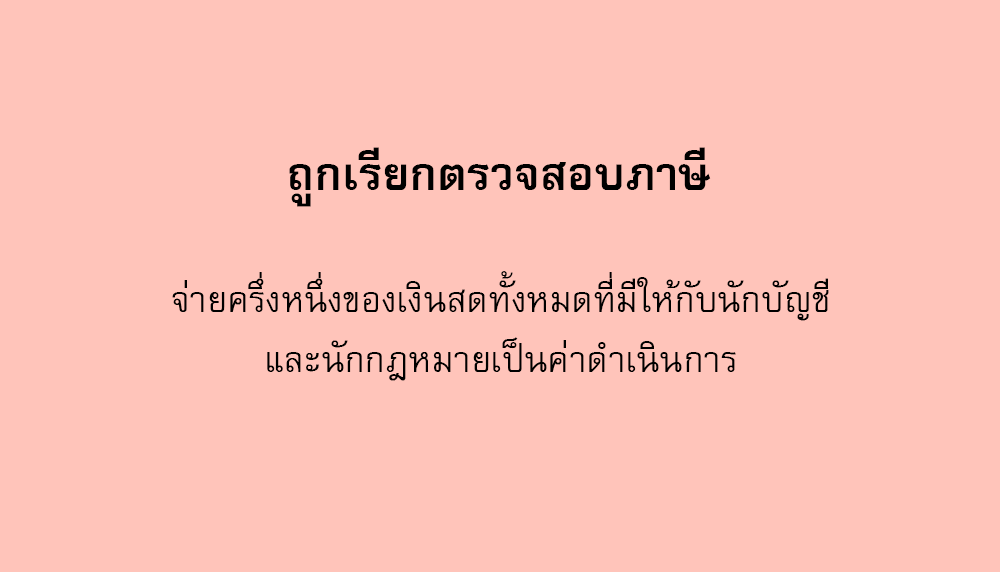
<style>
.page{position:relative;width:1000px;height:572px;background:#ffc4ba}
.page>*{position:absolute;margin:0}
.t1{font:64px "FreesiaUPCBold";color:#000000}
.t2{font:50px/60px "FreesiaUPC";color:#000000}
</style>
<div class="page">
<p class="t1" style="left:289px;top:147px;width:422px;height:60px">ถูกเรียกตรวจสอบภาษี</p>
<p class="t2" style="left:172px;top:271px;width:657px;height:110px;text-align:center">จ่ายครึ่งหนึ่งของเงินสดทั้งหมดที่มีให้กับนักบัญชี<br>และนักกฎหมายเป็นค่าดำเนินการ</p>
</div>
